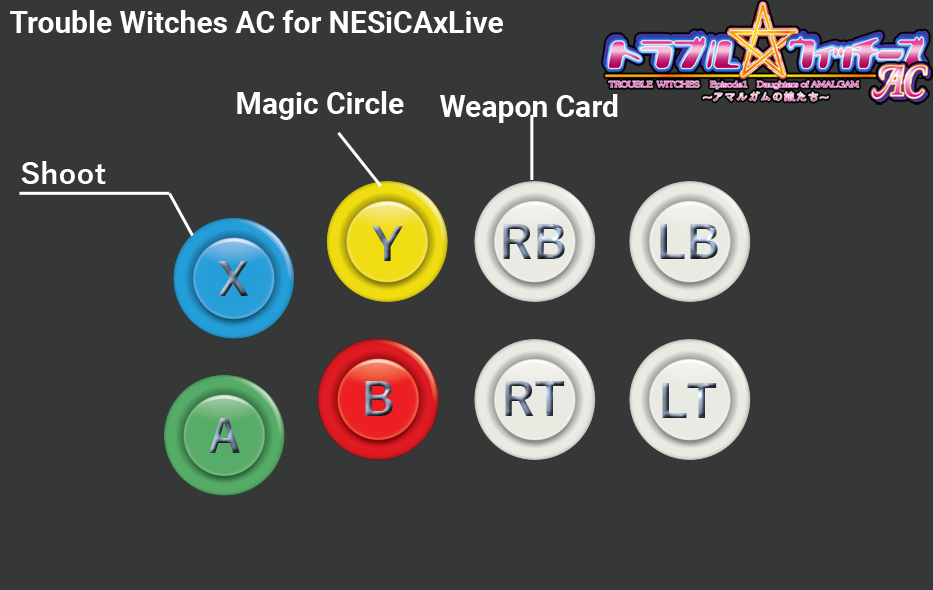
<style>
.page{position:relative;width:933px;height:590px;background:#363838}
.page>*{position:absolute;margin:0}
.t1{font:30px "Roboto-Bold";color:#ffffff}
.t2{font:30px "YuGothic-Bold";color:#ffffff}
</style>
<div class="page">
<p class="t1" style="left:10px;top:10px;width:493px;height:23px">Trouble Witches AC for NESiCAxLive</p>
<p class="t1" style="left:237px;top:91px;width:167px;height:29px">Magic Circle</p>
<p class="t1" style="left:440px;top:94px;width:178px;height:29px">Weapon Card</p>
<p class="t2" style="left:21px;top:161px;width:85px;height:23px">Shoot</p>
</div>
